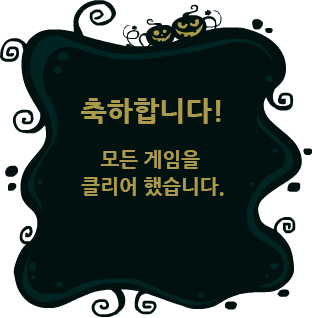
<style>
.page{position:relative;width:312px;height:318px;background:#001110}
.page>*{position:absolute;margin:0}
.t1{font:28px "NanumGothicExtraBold";color:#ab9a4a}
.t2{font:20px/27px "NanumGothicExtraBold";color:#ab9a4a}
</style>
<div class="page">
<p class="t1" style="left:81px;top:98px;width:140px;height:26px">축하합니다!</p>
<p class="t2" style="left:81px;top:150px;width:143px;height:46px;text-align:center">모든 게임을 <br>클리어 했습니다.</p>
</div>
